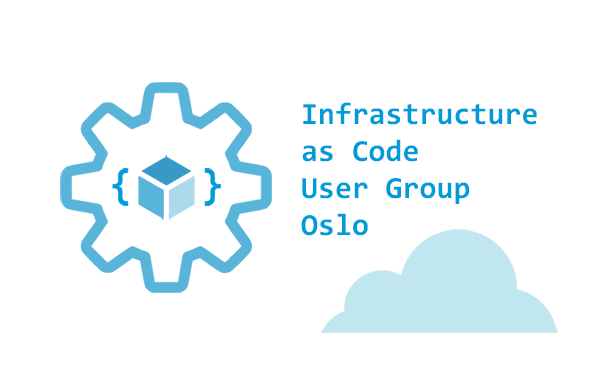
<style>
.page{position:relative;width:600px;height:375px;background:#ffffff}
.page>*{position:absolute;margin:0}
.t1{font:30.8px "Consolas-Bold";color:#009cd9}
</style>
<div class="page">
<p class="t1" style="left:301px;top:102px;width:236px;height:134px">Infrastructure<br>as Code<br>User Group<br>Oslo</p>
</div>
